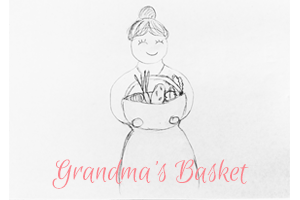
<style>
.page{position:relative;width:300px;height:200px}
.page>*{position:absolute;margin:0}
.t1{font:33.3px "EuphoriaScript-Regular";color:#fb8991}
</style>
<div class="page">
<p class="t1" style="left:52px;top:159px;width:197px;height:30px">Grandma’s Basket</p>
</div>
